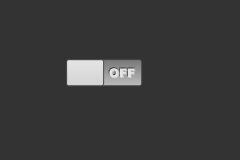
<style>
.page{position:relative;width:240px;height:160px;background:#333333}
.page>*{position:absolute;margin:0}
.t1{font:12px "Arial-Black";color:#e4e4e4}
</style>
<div class="page">
<p class="t1" style="left:109px;top:68px;width:26px;height:10px">OFF</p>
</div>
